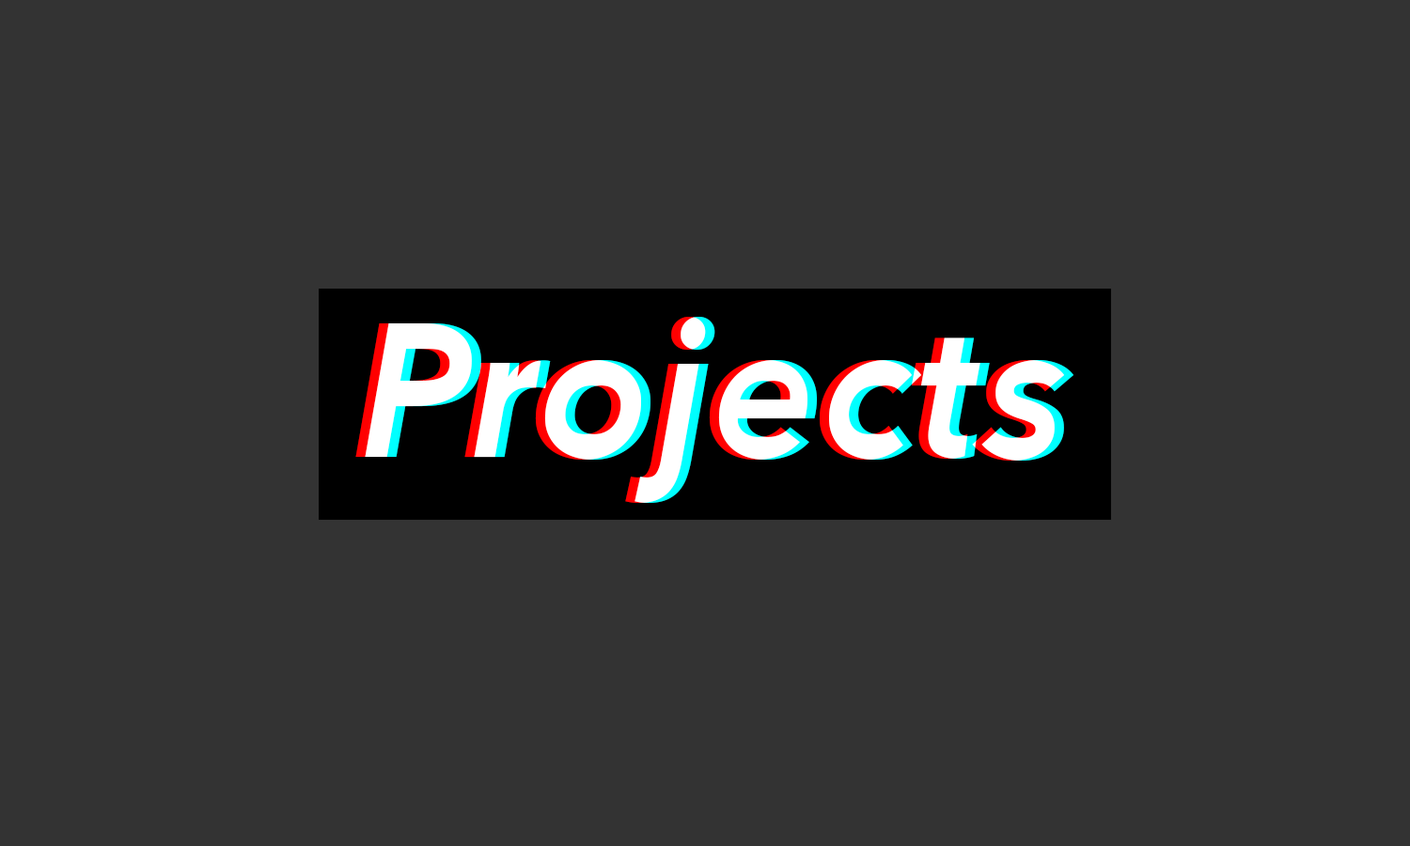
<style>
.page{position:relative;width:1410px;height:846px;background:#333333}
.page>*{position:absolute;margin:0}
.t1{font:188px "AvenirNext-BoldItalic";color:#ffffff}
</style>
<div class="page">
<p class="t1" style="left:355px;top:317px;width:709px;height:186px">Projects</p>
<p class="t1" style="left:365px;top:317px;width:708px;height:186px">Projects</p>
</div>
